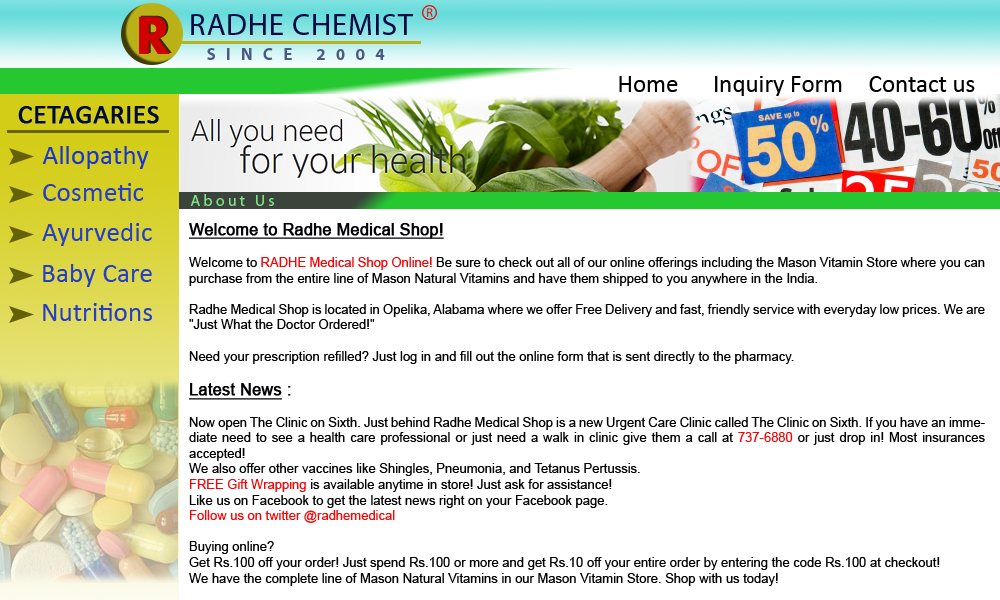
<style>
.page{position:relative;width:1000px;height:600px;background:#ffffff}
.page>*{position:absolute;margin:0}
.t1{font:56px "Aharoni-Bold";letter-spacing:0.2em;color:#d10000}
.t2{font:31px "MyriadPro-Regular";letter-spacing:0.025em;color:#030a44}
.t3{font:17px "MyriadPro-Bold";letter-spacing:0.2em;color:#4c5a83}
.t4{font:25px "Calibri";color:#000000}
.t5{font:27px "Calibri";letter-spacing:0.005em;color:#020a39;font-weight:bold}
.t6{font:27px "Calibri";letter-spacing:0.01em;color:#1833d4}
.t7{font:27px "Calibri";letter-spacing:0.01em;color:#253dc8}
.t8{font:16px "MyriadPro-Regular";letter-spacing:0.2em;color:#84e28b}
.t9{font:13px "ArialMT";color:#000000}
.t10{font:16px "ArialMT";color:#000003;font-weight:bold;text-decoration:underline}
.t11{font:13px "ArialMT";color:#f80202}
.t12{font:16px "ArialMT";color:#000002;font-weight:bold;text-decoration:underline}
.t13{font:16px "ArialMT";color:#000002;font-weight:bold}
.t14{font:13px "ArialMT";color:#f80404}
.t15{font:13px "ArialMT";color:#f40606}
.t16{font:13px "ArialMT";color:#fa0404}
</style>
<div class="page">
<p class="t1" style="left:139px;top:16px;width:31px;height:38px">R</p>
<p class="t2" style="left:191px;top:14px;width:222px;height:21px">RADHE CHEMIST</p>
<p class="t3" style="left:207px;top:48px;width:178px;height:12px">S I N C E   2 0 0 4</p>
<p class="t4" style="left:619px;top:76px;width:59px;height:16px">Home</p>
<p class="t4" style="left:715px;top:76px;width:127px;height:20px">Inquiry Form</p>
<p class="t4" style="left:869px;top:76px;width:106px;height:16px">Contact us</p>
<p class="t5" style="left:18px;top:106px;width:141px;height:18px">CETAGARIES</p>
<p class="t6" style="left:42px;top:146px;width:107px;height:23px">Allopathy</p>
<p class="t7" style="left:43px;top:183px;width:101px;height:18px">Cosmetic</p>
<p class="t8" style="left:190px;top:194px;width:84px;height:12px">About Us</p>
<p class="t7" style="left:42px;top:223px;width:110px;height:23px">Ayurvedic</p>
<p class="t9" style="left:189px;top:223px;width:796px;height:363px;text-align:justify"><span class="t10">Welcome to Radhe Medical Shop!<br><br></span>Welcome to <span class="t11">RADHE Medical Shop Online!</span> Be sure to check out all of our online offerings including the Mason Vitamin Store where you can purchase from the entire line of Mason Natural Vitamins and have them shipped to you anywhere in the India.<br><br>Radhe Medical Shop is located in Opelika, Alabama where we offer Free Delivery and fast, friendly service with everyday low prices. We are "Just What the Doctor Ordered!" <br><br>Need your prescription refilled? Just log in and fill out the online form that is sent directly to the pharmacy.<br><br><span class="t12">Latest News</span><span class="t13"> : <br></span><br>Now open The Clinic on Sixth. Just behind Radhe Medical Shop is a new Urgent Care Clinic called The Clinic on Sixth. If you have an immediate need to see a health care professional or just need a walk in clinic give them a call at<span class="t14"> 737-6880 </span>or just drop in! Most insurances accepted!<br>We also offer other vaccines like Shingles, Pneumonia, and Tetanus Pertussis. <br><span class="t15">FREE Gift Wrapping </span>is available anytime in store! Just ask for assistance!<br>Like us on Facebook to get the latest news right on your Facebook page.  <br><span class="t16">Follow us on twitter @radhemedical<br></span><br>Buying online? <br>Get Rs.100 off your order! Just spend Rs.100 or more and get Rs.10 off your entire order by entering the code Rs.100 at checkout! <br>We have the complete line of Mason Natural Vitamins in our Mason Vitamin Store. Shop with us today!</p>
<p class="t7" style="left:43px;top:264px;width:109px;height:23px">Baby Care</p>
<p class="t7" style="left:43px;top:303px;width:109px;height:18px">Nutritions</p>
</div>
